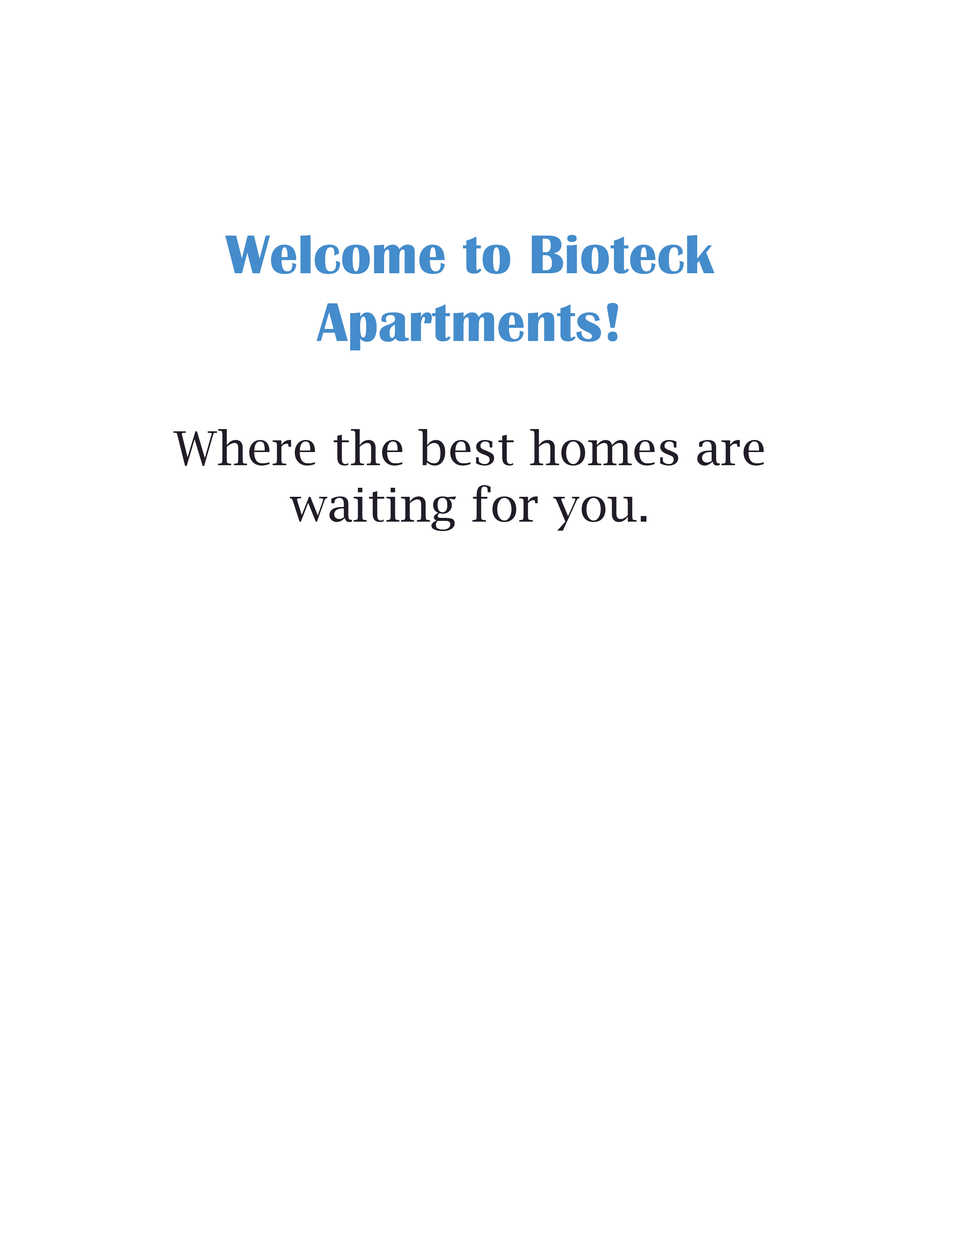
<style>
.page{position:relative;width:960px;height:1242px;background:#ffffff}
.page>*{position:absolute;margin:0}
.t1{font:47.1px "LucidaBright";color:#221c28}
.t2{font:56.5px "BritannicBold";color:#448ccb}
</style>
<div class="page">
<p class="t1" style="left:174px;top:235px;width:590px;height:296px;text-align:center"><span class="t2">Welcome to Bioteck Apartments!<br><br></span>Where the best homes are waiting for you.</p>
</div>
